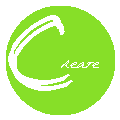
<style>
.page{position:relative;width:120px;height:120px;background:#87df28}
.page>*{position:absolute;margin:0}
.t1{font:100px "PhontPhreak'sHandwriting";color:#ffffff}
.t2{font:20px "PhontPhreak'sHandwriting";color:#ffffff}
</style>
<div class="page">
<p class="t1" style="left:8px;top:15px;width:62px;height:70px">C</p>
<p class="t1" style="left:11px;top:21px;width:62px;height:70px">C</p>
<p class="t2" style="left:61px;top:60px;width:38px;height:8px">reate</p>
</div>
